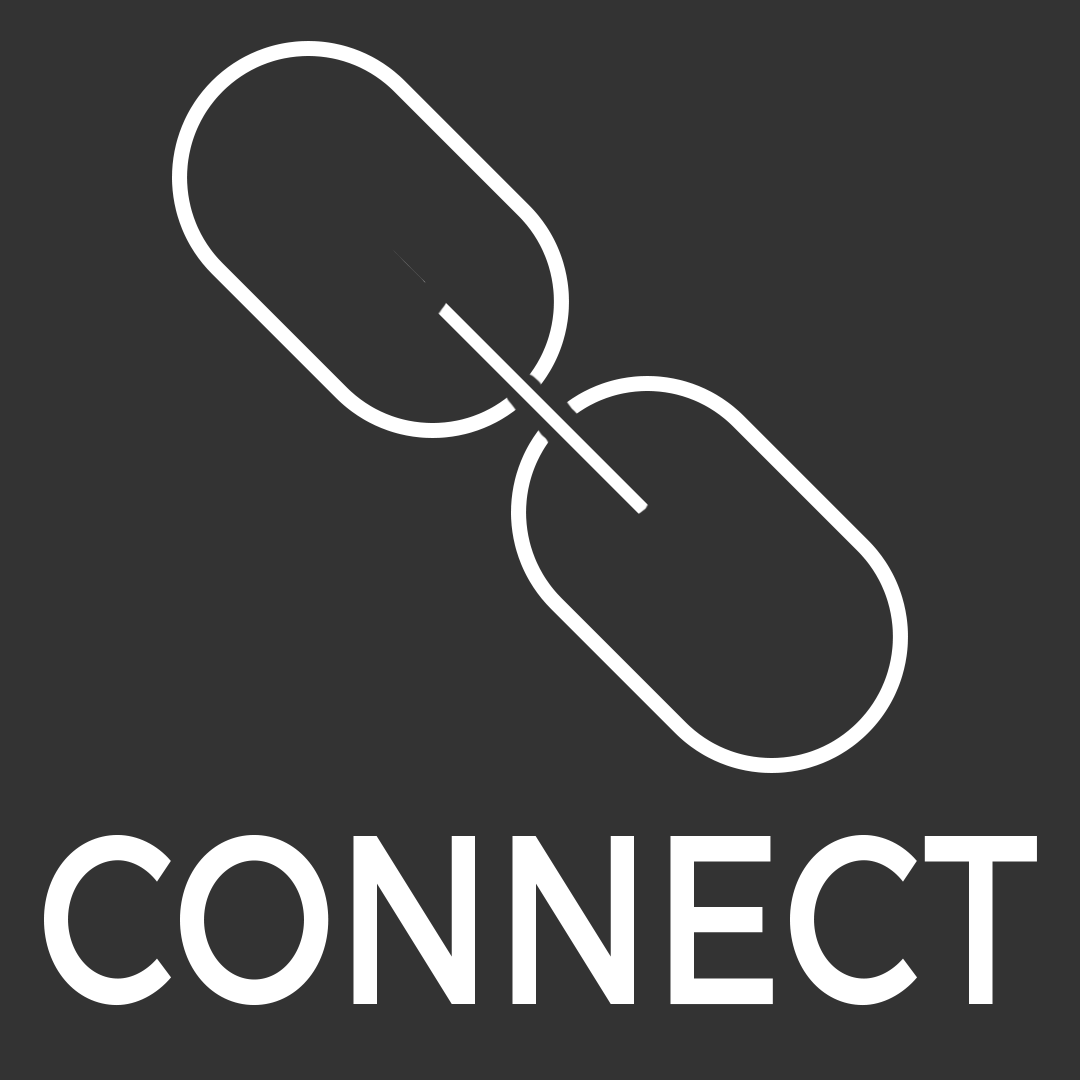
<style>
.page{position:relative;width:1080px;height:1080px;background:#333333}
.page>*{position:absolute;margin:0}
.t1{font:240px "Montserrat-Regular";color:#ffffff;scale:0.83 1}
</style>
<div class="page">
<p class="t1" style="left:44px;top:835px;width:993px;height:171px">CONNECT</p>
</div>
